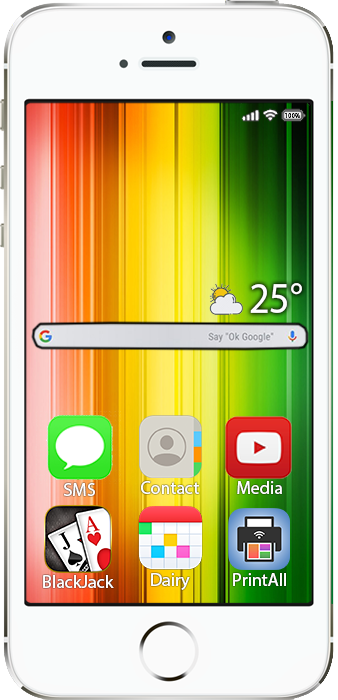
<style>
.page{position:relative;width:338px;height:700px}
.page>*{position:absolute;margin:0}
.t1{font:6.8px "MyriadHebrew-Regular";color:#000000}
.t2{font:44.2px "MyriadHebrew-Regular";color:#fefefe;scale:0.91 1}
.t3{font:18px "MyriadHebrew-Regular";color:#fefefe}
</style>
<div class="page">
<p class="t1" style="left:285px;top:113px;width:16px;height:5px">100%</p>
<p class="t2" style="left:250px;top:283px;width:52px;height:30px">25°</p>
<p class="t3" style="left:64px;top:483px;width:31px;height:13px">SMS</p>
<p class="t3" style="left:141px;top:481px;width:58px;height:13px">Contact</p>
<p class="t3" style="left:237px;top:481px;width:45px;height:13px">Media</p>
<p class="t3" style="left:43px;top:575px;width:71px;height:13px">BlackJack</p>
<p class="t3" style="left:151px;top:573px;width:39px;height:17px">Dairy</p>
<p class="t3" style="left:233px;top:573px;width:53px;height:13px">PrintAll</p>
</div>
